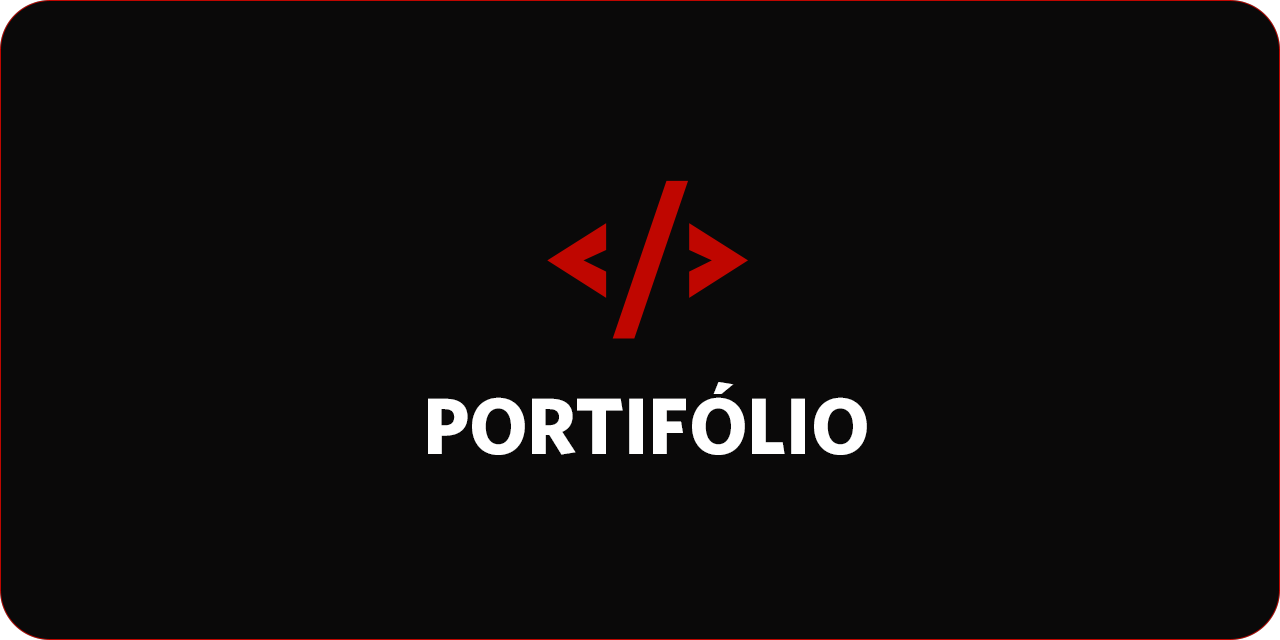
<style>
.page{position:relative;width:1280px;height:640px;background:#0a0909}
.page>*{position:absolute;margin:0}
.t1{font:80px "Whitney-Bold";color:#ffffff;text-transform:uppercase}
</style>
<div class="page">
<p class="t1" style="left:428px;top:382px;width:439px;height:73px">pORTIFÓLIO</p>
</div>
